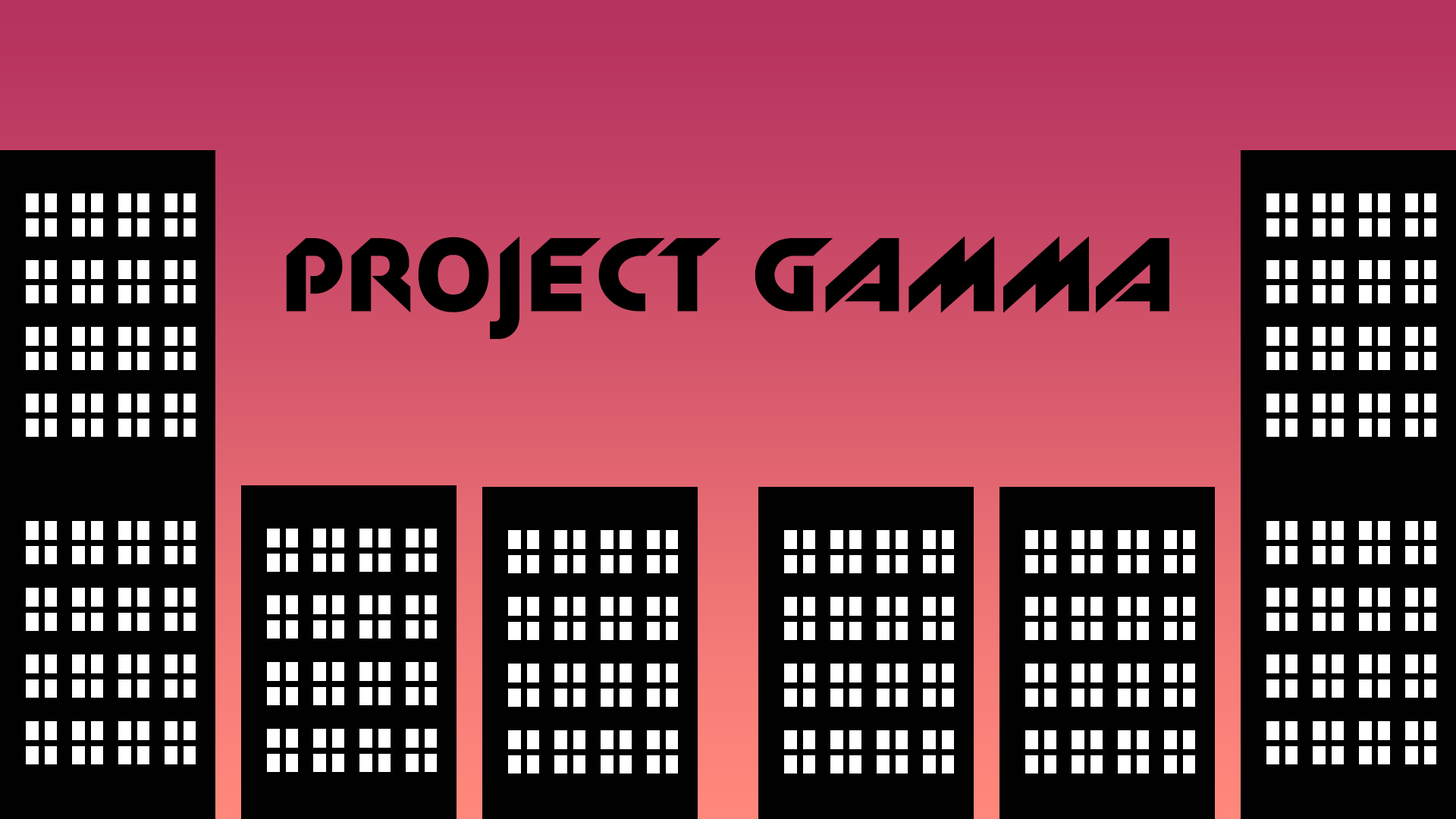
<style>
.page{position:relative;width:1456px;height:819px;background:#010101}
.page>*{position:absolute;margin:0}
.t1{font:98.6px "New_Zelek";color:#000000}
</style>
<div class="page">
<p class="t1" style="left:286px;top:236px;width:883px;height:103px">Project Gamma</p>
</div>
